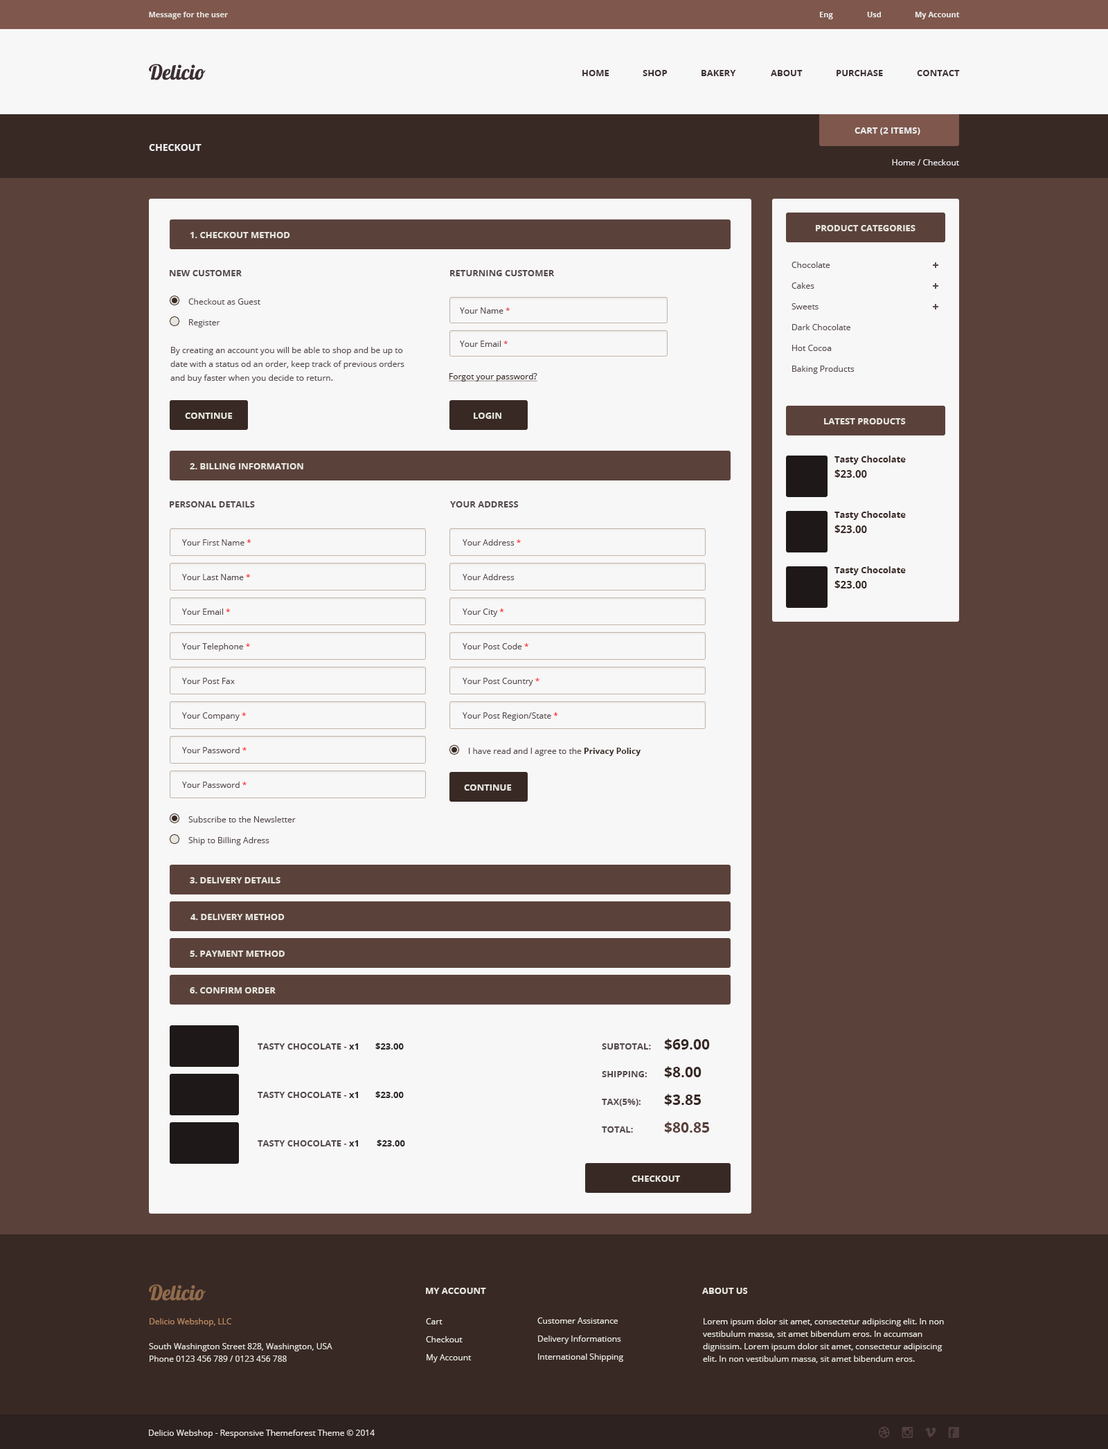
<style>
.page{position:relative;width:1108px;height:1449px;background:#f8f7f7}
.page>*{position:absolute;margin:0}
.t1{font:7.6px "OpenSans-Bold";color:#e7e5de}
.t2{font:7.6px "OpenSans-Bold";color:#ebebeb}
.t3{font:20.8px "Lobster1.4";color:#3c2f33}
.t4{font:9px "OpenSans-Bold";color:#3c2f33}
.t5{font:9px "OpenSans-Bold";color:#ebebeb}
.t6{font:9.7px "OpenSans-Bold";color:#ebebeb}
.t7{font:8.3px "OpenSans";color:#ebebeb}
.t8{font:9px "OpenSans-Bold";color:#e7e5de}
.t9{font:9px "OpenSans-Bold";color:#554a4c}
.t10{font:8.3px/20.8px "OpenSans";color:#554a4c}
.t11{font:8.3px "OpenSans";color:#554a4c}
.t12{font:8.3px "OpenSans";color:#e12727}
.t13{font:8.3px/13.8px "OpenSans";color:#554a4c}
.t14{font:8.3px "OpenSans";color:#382925;text-decoration:underline}
.t15{font:9px "OpenSans-Bold";color:#382925}
.t16{font:10.4px "OpenSans-Bold";color:#382925}
.t17{font:8.3px "OpenSans";color:#ff0000}
.t18{font:8.3px "OpenSans-Bold";color:#382925}
.t19{font:9px "OpenSans-Bold";color:#2a2523}
.t20{font:14.5px "OpenSans-Bold";color:#382925}
.t21{font:14.5px "OpenSans-Bold";color:#5a423b}
.t22{font:20.8px "Lobster1.4";color:#926b4c}
.t23{font:8.3px/12.5px "OpenSans";color:#e7e5de}
.t24{font:8.3px/12.5px "OpenSans";color:#be8c60}
.t25{font:8.3px/18px "OpenSans";color:#e7e5de}
.t26{font:8.3px "OpenSans";color:#e7e5de}
</style>
<div class="page">
<p class="t1" style="left:149px;top:12px;width:79px;height:7px">Message for the user</p>
<p class="t2" style="left:819px;top:12px;width:14px;height:7px">Eng</p>
<p class="t2" style="left:867px;top:12px;width:14px;height:5px">Usd</p>
<p class="t2" style="left:915px;top:12px;width:45px;height:7px">My Account</p>
<p class="t3" style="left:149px;top:64px;width:57px;height:16px">Delicio</p>
<p class="t4" style="left:582px;top:70px;width:27px;height:6px">HOME</p>
<p class="t4" style="left:642px;top:70px;width:25px;height:6px">SHOP</p>
<p class="t4" style="left:701px;top:70px;width:35px;height:6px">BAKERY</p>
<p class="t4" style="left:771px;top:70px;width:31px;height:6px">ABOUT</p>
<p class="t4" style="left:836px;top:70px;width:47px;height:6px">PURCHASE</p>
<p class="t4" style="left:917px;top:70px;width:43px;height:6px">CONTACT</p>
<p class="t5" style="left:854px;top:127px;width:66px;height:8px">CART (2 ITEMS)</p>
<p class="t6" style="left:149px;top:144px;width:52px;height:7px">CHECKOUT</p>
<p class="t7" style="left:892px;top:159px;width:67px;height:6px">Home / Checkout</p>
<p class="t8" style="left:190px;top:232px;width:100px;height:6px">1. CHECKOUT METHOD</p>
<p class="t8" style="left:816px;top:225px;width:99px;height:6px">PRODUCT CATEGORIES</p>
<p class="t9" style="left:170px;top:270px;width:72px;height:6px">NEW CUSTOMER</p>
<p class="t9" style="left:450px;top:270px;width:105px;height:6px">RETURNING CUSTOMER</p>
<p class="t10" style="left:791px;top:262px;width:63px;height:112px">Chocolate<br>Cakes<br>Sweets<br>Dark Chocolate<br>Hot Cocoa<br>Baking Products</p>
<p class="t11" style="left:188px;top:298px;width:72px;height:7px">Checkout as Guest</p>
<p class="t11" style="left:460px;top:307px;width:50px;height:7px">Your Name <span class="t12">*</span></p>
<p class="t11" style="left:189px;top:319px;width:31px;height:8px">Register</p>
<p class="t11" style="left:460px;top:341px;width:48px;height:6px">Your Email <span class="t12">*</span></p>
<p class="t13" style="left:170px;top:347px;width:234px;height:36px">By creating an account you will be able to shop and be up to date with a status od an order, keep track of previous orders and buy faster when you decide to return.</p>
<p class="t14" style="left:449px;top:373px;width:88px;height:8px">Forgot your password?</p>
<p class="t8" style="left:185px;top:413px;width:48px;height:6px">CONTINUE</p>
<p class="t8" style="left:474px;top:413px;width:27px;height:6px">LOGIN</p>
<p class="t8" style="left:824px;top:418px;width:82px;height:6px">LATEST PRODUCTS</p>
<p class="t15" style="left:834px;top:456px;width:72px;height:9px">Tasty Chocolate</p>
<p class="t8" style="left:190px;top:463px;width:113px;height:6px">2. BILLING INFORMATION</p>
<p class="t16" style="left:834px;top:469px;width:33px;height:9px">$23.00</p>
<p class="t9" style="left:170px;top:501px;width:85px;height:6px">PERSONAL DETAILS</p>
<p class="t9" style="left:450px;top:501px;width:69px;height:6px">YOUR ADDRESS</p>
<p class="t15" style="left:834px;top:511px;width:72px;height:9px">Tasty Chocolate</p>
<p class="t16" style="left:834px;top:525px;width:33px;height:8px">$23.00</p>
<p class="t11" style="left:182px;top:539px;width:69px;height:7px">Your First Name <span class="t17">*</span></p>
<p class="t11" style="left:462px;top:539px;width:59px;height:7px">Your Address <span class="t17">*</span></p>
<p class="t15" style="left:834px;top:566px;width:72px;height:9px">Tasty Chocolate</p>
<p class="t11" style="left:182px;top:574px;width:69px;height:6px">Your Last Name <span class="t17">*</span></p>
<p class="t11" style="left:462px;top:574px;width:52px;height:6px">Your Address</p>
<p class="t16" style="left:834px;top:580px;width:33px;height:8px">$23.00</p>
<p class="t11" style="left:182px;top:609px;width:49px;height:6px">Your Email <span class="t17">*</span></p>
<p class="t11" style="left:462px;top:609px;width:42px;height:8px">Your City <span class="t17">*</span></p>
<p class="t11" style="left:182px;top:643px;width:68px;height:8px">Your Telephone <span class="t17">*</span></p>
<p class="t11" style="left:462px;top:643px;width:67px;height:6px">Your Post Code <span class="t17">*</span></p>
<p class="t11" style="left:182px;top:678px;width:53px;height:6px">Your Post Fax</p>
<p class="t11" style="left:462px;top:678px;width:77px;height:8px">Your Post Country <span class="t17">*</span></p>
<p class="t11" style="left:182px;top:712px;width:64px;height:9px">Your Company <span class="t17">*</span></p>
<p class="t11" style="left:462px;top:712px;width:96px;height:9px">Your Post Region/State <span class="t17">*</span></p>
<p class="t11" style="left:182px;top:747px;width:64px;height:6px">Your Password <span class="t17">*</span></p>
<p class="t11" style="left:469px;top:748px;width:171px;height:8px">I have read and I agree to the <span class="t18">Privacy Policy</span></p>
<p class="t11" style="left:182px;top:782px;width:64px;height:6px">Your Password <span class="t17">*</span></p>
<p class="t8" style="left:464px;top:784px;width:48px;height:7px">CONTINUE</p>
<p class="t11" style="left:188px;top:816px;width:108px;height:6px">Subscribe to the Newsletter</p>
<p class="t11" style="left:188px;top:837px;width:81px;height:8px">Ship to Billing Adress</p>
<p class="t8" style="left:190px;top:877px;width:90px;height:6px">3. DELIVERY DETAILS</p>
<p class="t8" style="left:190px;top:914px;width:95px;height:6px">4. DELIVERY METHOD</p>
<p class="t8" style="left:190px;top:951px;width:95px;height:6px">5. PAYMENT METHOD</p>
<p class="t8" style="left:190px;top:987px;width:86px;height:6px">6. CONFIRM ORDER</p>
<p class="t9" style="left:258px;top:1043px;width:100px;height:7px">TASTY CHOCOLATE - <span class="t19">x1</span></p>
<p class="t19" style="left:375px;top:1043px;width:29px;height:7px">$23.00</p>
<p class="t9" style="left:602px;top:1043px;width:49px;height:7px">SUBTOTAL:</p>
<p class="t20" style="left:664px;top:1038px;width:46px;height:12px">$69.00</p>
<p class="t9" style="left:602px;top:1071px;width:45px;height:6px">SHIPPING:</p>
<p class="t20" style="left:664px;top:1066px;width:37px;height:12px">$8.00</p>
<p class="t9" style="left:258px;top:1092px;width:100px;height:6px">TASTY CHOCOLATE - <span class="t19">x1</span></p>
<p class="t19" style="left:375px;top:1091px;width:29px;height:7px">$23.00</p>
<p class="t20" style="left:664px;top:1094px;width:37px;height:12px">$3.85</p>
<p class="t9" style="left:602px;top:1099px;width:38px;height:7px">TAX(5%):</p>
<p class="t21" style="left:664px;top:1122px;width:45px;height:11px">$80.85</p>
<p class="t9" style="left:602px;top:1126px;width:31px;height:7px">TOTAL:</p>
<p class="t9" style="left:258px;top:1140px;width:100px;height:6px">TASTY CHOCOLATE - <span class="t19">x1</span></p>
<p class="t19" style="left:377px;top:1140px;width:28px;height:6px">$23.00</p>
<p class="t8" style="left:631px;top:1176px;width:49px;height:6px">CHECKOUT</p>
<p class="t22" style="left:149px;top:1284px;width:57px;height:17px">Delicio</p>
<p class="t8" style="left:426px;top:1288px;width:60px;height:6px">MY ACCOUNT</p>
<p class="t8" style="left:702px;top:1288px;width:46px;height:6px">ABOUT US</p>
<p class="t23" style="left:149px;top:1318px;width:183px;height:44px"><span class="t24">Delicio Webshop, LLC<br><br></span>South Washington Street 828, Washington, USA <br>Phone 0123 456 789 / 0123 456 788</p>
<p class="t25" style="left:426px;top:1318px;width:45px;height:44px">Cart         <br>Checkout<br>My Account</p>
<p class="t25" style="left:537px;top:1317px;width:86px;height:45px">Customer Assistance<br>Delivery Informations<br>International Shipping</p>
<p class="t23" style="left:703px;top:1318px;width:241px;height:45px">Lorem ipsum dolor sit amet, consectetur adipiscing elit. In non vestibulum massa, sit amet bibendum eros. In accumsan dignissim. Lorem ipsum dolor sit amet, consectetur adipiscing elit. In non vestibulum massa, sit amet bibendum eros.</p>
<p class="t26" style="left:149px;top:1430px;width:226px;height:8px">Delicio Webshop - Responsive Themeforest Theme © 2014</p>
</div>
